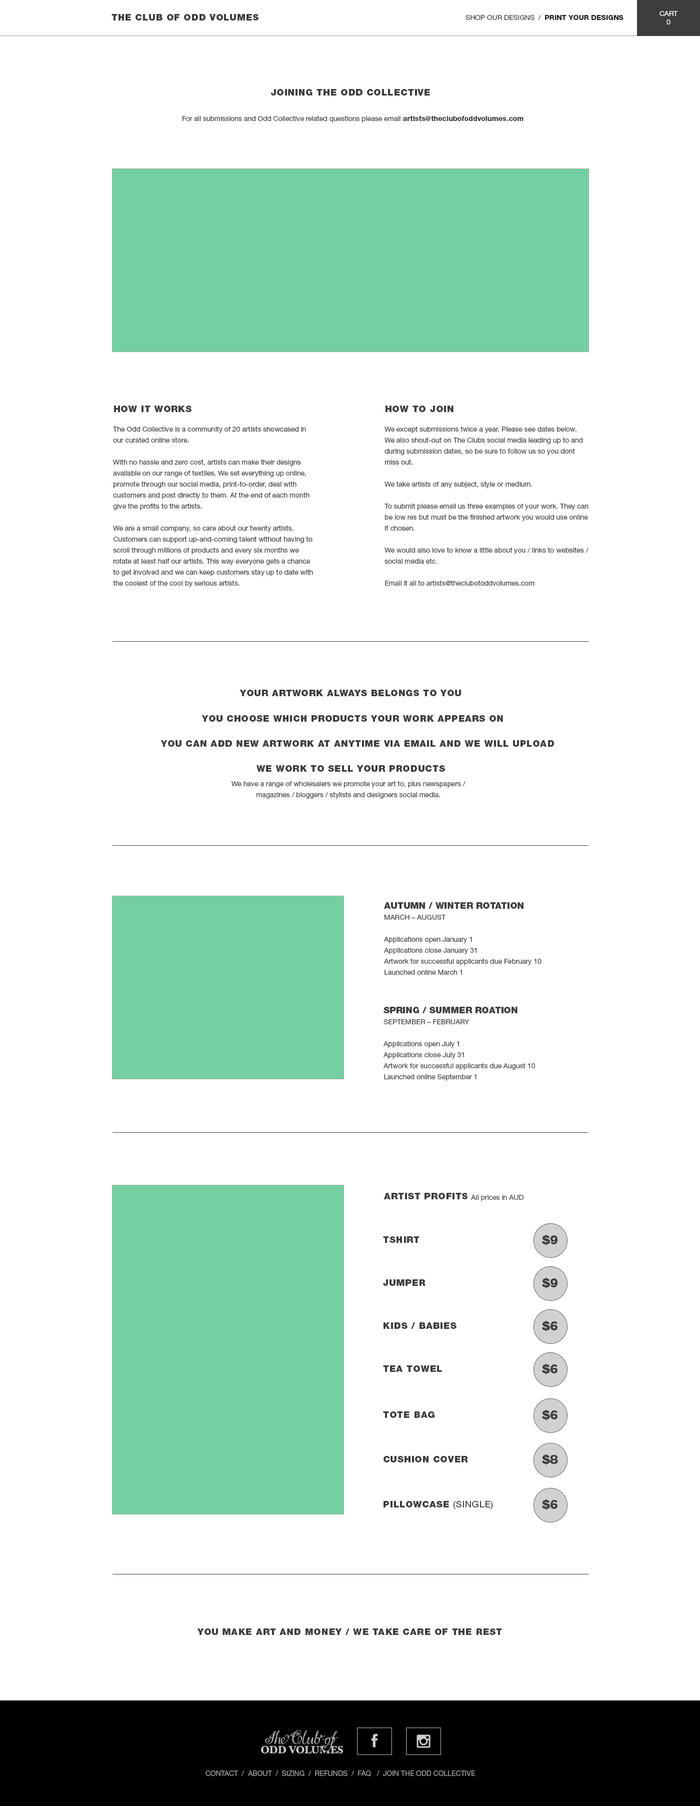
<style>
.page{position:relative;width:700px;height:1806px;background:#ffffff}
.page>*{position:absolute;margin:0}
.t1{font:9px "HelveticaNeueLTStd-Blk";letter-spacing:0.05em;color:#3d3d3d}
.t2{font:7px "HelveticaNeueLTStd-Roman";color:#3d3d3d}
.t3{font:7px "HelveticaNeueLTStd-Hv";color:#1b1b1b}
.t4{font:7px "HelveticaNeueLTStd-Roman";color:#ffffff}
.t5{font:7px "HelveticaNeueLTStd-Roman";color:#3e3e3e}
.t6{font:7px "HelveticaNeueLTStd-Hv";color:#3e3e3e}
.t7{font:7px/11px "HelveticaNeueLTStd-Roman";color:#3e3e3e}
.t8{font:9px/11px "HelveticaNeueLTStd-Blk";color:#3e3e3e}
.t9{font:12px "HelveticaNeueLTStd-Blk";color:#3e3e3e}
.t10{font:9px "HelveticaNeueLTStd-Roman";letter-spacing:0.05em;color:#3d3d3d}
.t11{font:7.2px "HelveticaNeueLTStd-Roman";color:#9b9b9b}
</style>
<div class="page">
<p class="t1" style="left:112px;top:14px;width:146px;height:6px">THE CLUB OF ODD VOLUMES</p>
<p class="t2" style="left:466px;top:15px;width:158px;height:5px">SHOP OUR DESIGNS  /  <span class="t3">PRINT YOUR DESIGNS</span></p>
<p class="t4" style="left:660px;top:11px;width:18px;height:13px;text-align:center">CART<br>0</p>
<p class="t1" style="left:271px;top:89px;width:159px;height:7px">JOINING THE ODD COLLECTIVE</p>
<p class="t5" style="left:182px;top:116px;width:342px;height:6px">For all submissions and Odd Collective related questions please email<span class="t6"> artists@theclubofoddvolumes.com</span></p>
<p class="t1" style="left:114px;top:406px;width:78px;height:6px">HOW IT WORKS</p>
<p class="t1" style="left:386px;top:406px;width:68px;height:6px">HOW TO JOIN</p>
<p class="t7" style="left:113px;top:426px;width:200px;height:161px">The Odd Collective is a community of 20 artists showcased in our curated online store. <br><br>With no hassle and zero cost, artists can make their designs available on our range of textiles. We set everything up online, promote through our social media, print-to-order, deal with customers and post directly to them. At the end of each month give the profits to the artists. <br><br>We are a small company, so care about our twenty artists. Customers can support up-and-coming talent without having to scroll through millions of products and every six months we rotate at least half our artists. This way everyone gets a chance to get involved and we can keep customers stay up to date with the coolest of the cool by serious artists.</p>
<p class="t7" style="left:384px;top:426px;width:204px;height:160px">We except submissions twice a year. Please see dates below. <br>We also shout-out on The Clubs social media leading up to and during submission dates, so be sure to follow us so you dont miss out.<br><br>We take artists of any subject, style or medium. <br><br>To submit please email us three examples of your work. They can be low res but must be the finished artwork you would use online if chosen. <br><br>We would also love to know a little about you / links to websites / social media etc. <br><br>Email it all to artists@theclubofoddvolumes.com</p>
<p class="t1" style="left:240px;top:690px;width:221px;height:6px">YOUR ARTWORK ALWAYS BELONGS TO YOU</p>
<p class="t1" style="left:202px;top:715px;width:301px;height:7px">YOU CHOOSE WHICH PRODUCTS YOUR WORK APPEARS ON</p>
<p class="t1" style="left:160px;top:740px;width:394px;height:6px">YOU CAN ADD NEW ARTWORK AT ANYTIME VIA EMAIL AND WE WILL UPLOAD</p>
<p class="t1" style="left:256px;top:765px;width:189px;height:7px">WE WORK TO SELL YOUR PRODUCTS</p>
<p class="t7" style="left:232px;top:780px;width:234px;height:18px;text-align:center">We have a range of wholesalers we promote your art to, plus newspapers / magazines / bloggers / stylists and designers social media.</p>
<p class="t7" style="left:384px;top:902px;width:158px;height:72px"><span class="t8">AUTUMN / WINTER ROTATION  <br></span>MARCH – AUGUST <br><br>Applications open January 1 <br>Applications close January 31 <br>Artwork for successful applicants due February 10<br>Launched online March 1</p>
<p class="t7" style="left:384px;top:1006px;width:151px;height:74px"><span class="t8">SPRING / SUMMER ROATION</span>  <br>SEPTEMBER – FEBRUARY <br><br>Applications open July 1 <br>Applications close July 31 <br>Artwork for successful applicants due August 10<br>Launched online September 1</p>
<p class="t1" style="left:384px;top:1192px;width:84px;height:7px">ARTIST PROFITS</p>
<p class="t5" style="left:471px;top:1194px;width:53px;height:7px">All prices in AUD</p>
<p class="t1" style="left:383px;top:1236px;width:37px;height:6px">TSHIRT</p>
<p class="t9" style="left:542px;top:1234px;width:16px;height:12px">$9</p>
<p class="t9" style="left:542px;top:1277px;width:16px;height:11px">$9</p>
<p class="t1" style="left:383px;top:1279px;width:43px;height:7px">JUMPER</p>
<p class="t1" style="left:384px;top:1322px;width:72px;height:6px">KIDS / BABIES</p>
<p class="t9" style="left:542px;top:1320px;width:16px;height:12px">$6</p>
<p class="t1" style="left:383px;top:1365px;width:59px;height:7px">TEA TOWEL</p>
<p class="t9" style="left:542px;top:1363px;width:16px;height:11px">$6</p>
<p class="t9" style="left:542px;top:1409px;width:16px;height:11px">$6</p>
<p class="t1" style="left:383px;top:1411px;width:51px;height:7px">TOTE BAG</p>
<p class="t1" style="left:384px;top:1456px;width:84px;height:6px">CUSHION COVER</p>
<p class="t9" style="left:542px;top:1454px;width:16px;height:11px">$8</p>
<p class="t1" style="left:384px;top:1500px;width:108px;height:9px">PILLOWCASE <span class="t10">(SINGLE)</span></p>
<p class="t9" style="left:542px;top:1498px;width:16px;height:12px">$6</p>
<p class="t1" style="left:197px;top:1628px;width:305px;height:6px">YOU MAKE ART AND MONEY / WE TAKE CARE OF THE REST</p>
<p class="t11" style="left:206px;top:1770px;width:270px;height:6px">CONTACT  /  ABOUT  /  SIZING  /  REFUNDS  /  FAQ   /  JOIN THE ODD COLLECTIVE</p>
</div>
